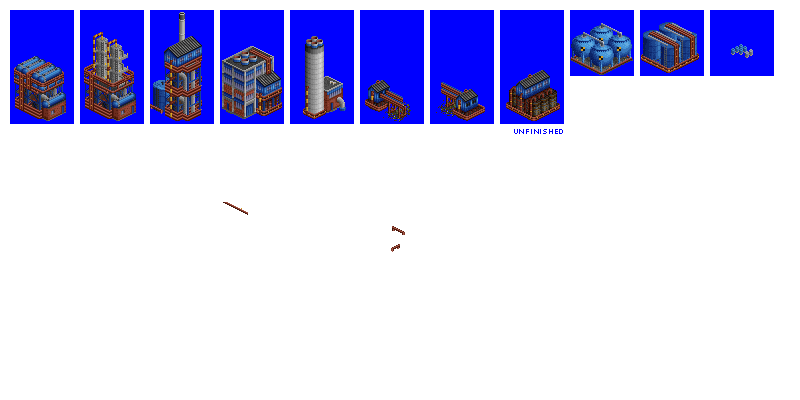
<style>
.page{position:relative;width:800px;height:400px;background:#ffffff}
.page>*{position:absolute;margin:0}
.t1{font:8px "Silkscreen";color:#0000ff}
</style>
<div class="page">
<p class="t1" style="left:514px;top:129px;width:49px;height:5px">unfinished</p>
</div>
